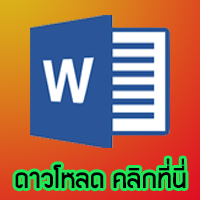
<style>
.page{position:relative;width:200px;height:200px}
.page>*{position:absolute;margin:0}
.t1{font:28.1px "TorsilpKanittha";color:#000000}
</style>
<div class="page">
<p class="t1" style="left:15px;top:158px;width:171px;height:31px">ดาวโหลด คลิกที่นี่</p>
</div>
